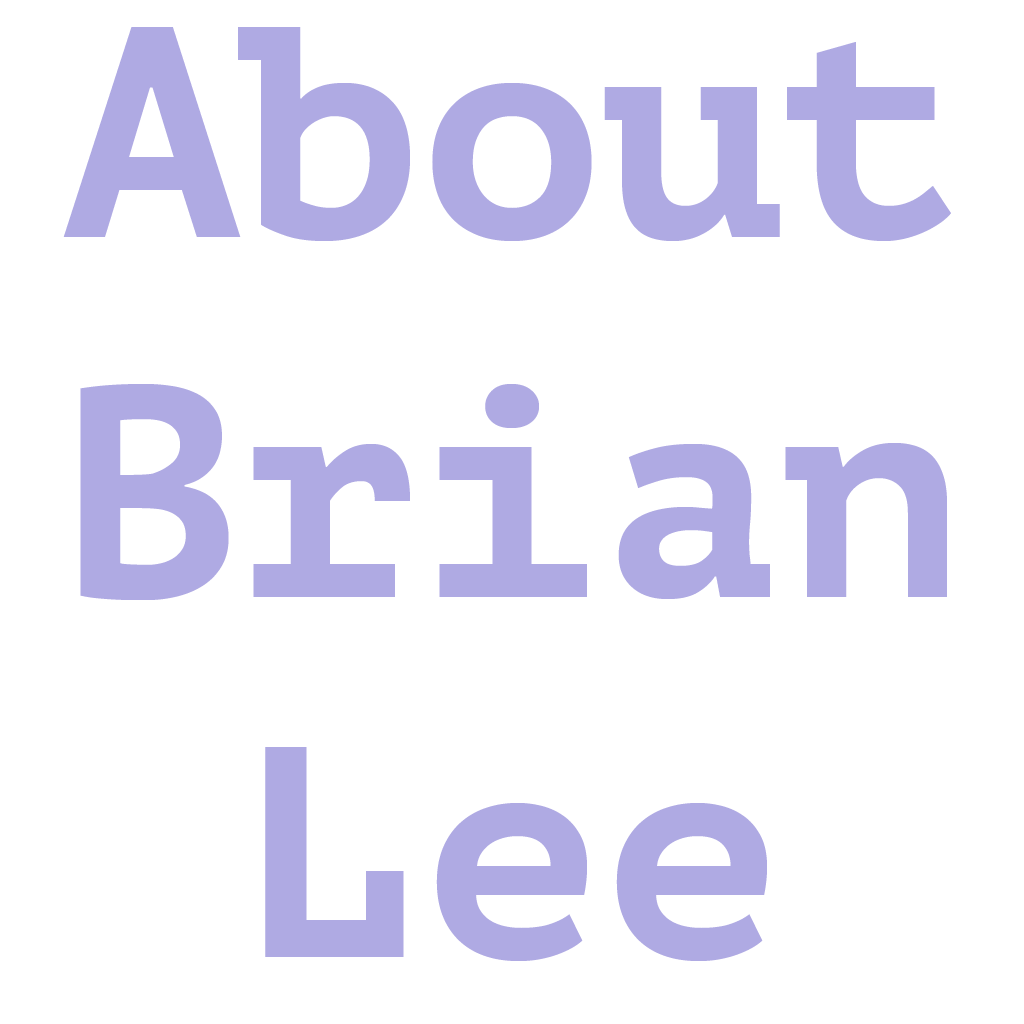
<style>
.page{position:relative;width:1024px;height:1024px;background:#ffffff}
.page>*{position:absolute;margin:0}
.t1{font:300px "PTMono-Bold";color:#afaae3}
</style>
<div class="page">
<p class="t1" style="left:63px;top:27px;width:888px;height:934px;text-align:center">About<br>Brian <br>Lee</p>
</div>
